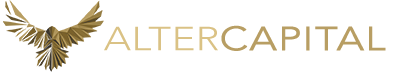
<style>
.page{position:relative;width:400px;height:72px;background:#ffffff}
.page>*{position:absolute;margin:0}
.t1{font:33.3px "Avenir-Book";letter-spacing:0.015em;color:#b89e63;font-weight:bold;scale:1.19 1}
.t2{font:33.3px "Avenir-Light";letter-spacing:0.015em;color:#dac285;scale:1.19 1}
</style>
<div class="page">
<p class="t1" style="left:104px;top:25px;width:282px;height:26px"><span class="t2">ALTER</span>CAPITAL</p>
</div>
